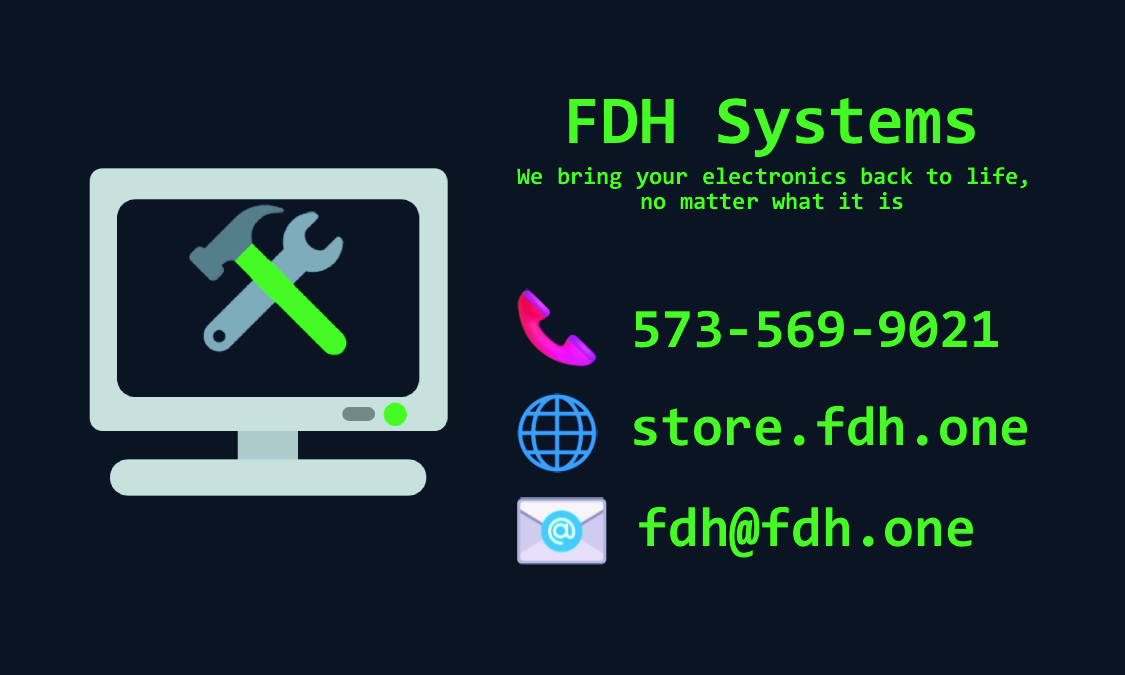
<style>
.page{position:relative;width:1125px;height:675px;background:#0b1422}
.page>*{position:absolute;margin:0}
.t1{font:69px "Consolas-Bold";color:#45fa25}
.t2{font:24px "Consolas-Bold";color:#47ff24}
.t3{font:56px "Consolas-Bold";color:#45fa25}
</style>
<div class="page">
<p class="t1" style="left:569px;top:97px;width:406px;height:61px">FDH Systems</p>
<p class="t2" style="left:517px;top:166px;width:510px;height:23px">We bring your electronics back to life,</p>
<p class="t2" style="left:641px;top:191px;width:262px;height:19px">no matter what it is</p>
<p class="t3" style="left:635px;top:310px;width:363px;height:38px">573-569-9021</p>
<p class="t3" style="left:634px;top:405px;width:393px;height:41px">store.fdh.one</p>
<p class="t3" style="left:637px;top:506px;width:336px;height:52px">fdh@fdh.one</p>
</div>
